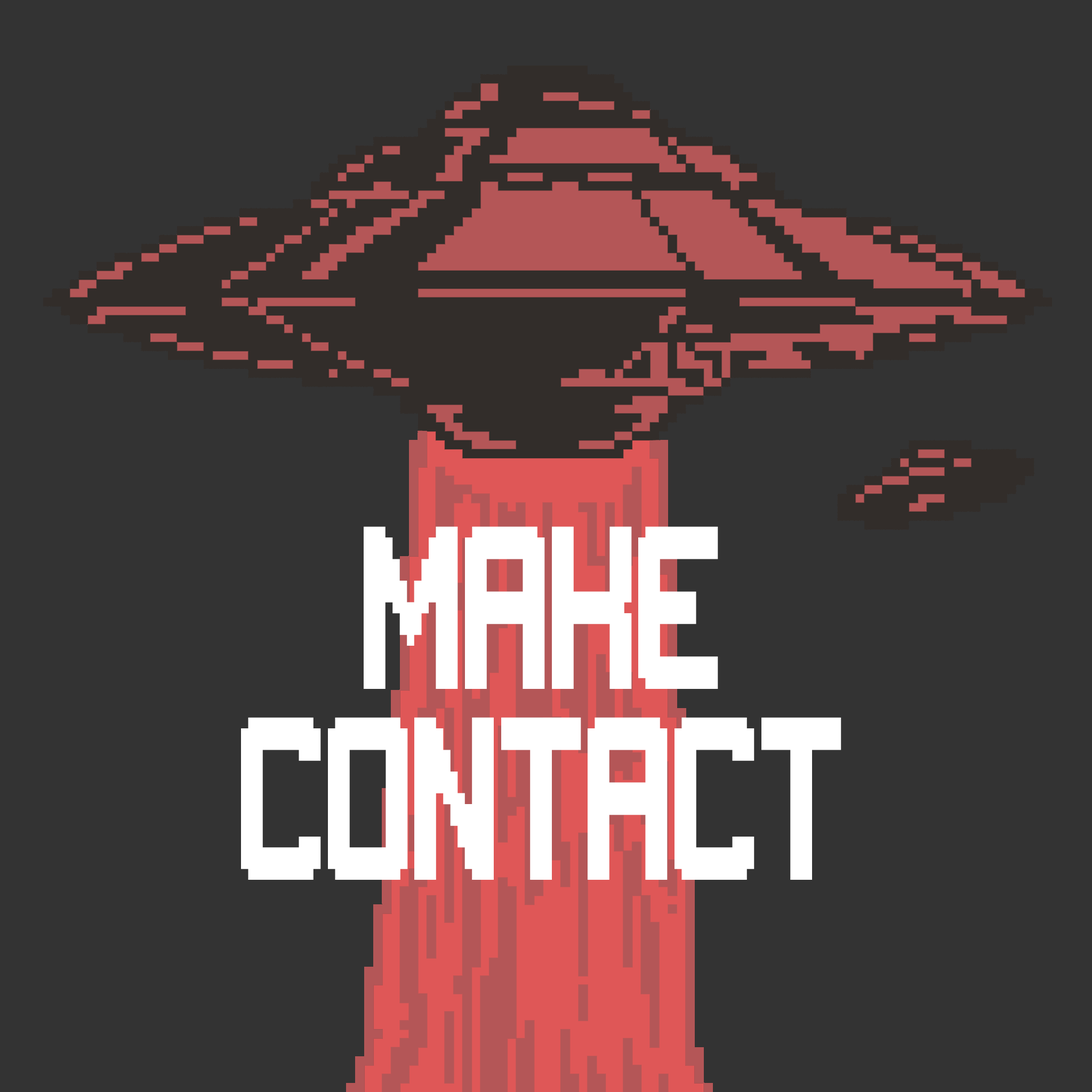
<style>
.page{position:relative;width:1092px;height:1092px;background:#333333}
.page>*{position:absolute;margin:0}
.t1{font:173px/190.9px "Gameplay";color:#ffffff;scale:0.67 1}
</style>
<div class="page">
<p class="t1" style="left:241px;top:526px;width:600px;height:354px;text-align:center">MAKE<br>CONTACT</p>
</div>
